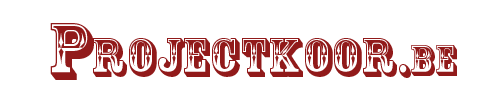
<style>
.page{position:relative;width:500px;height:104px;background:#ffffff}
.page>*{position:absolute;margin:0}
.t1{font:75px "RosewoodStd-Regular";color:#911a1a;font-variant:small-caps}
.t2{font:58.3px "RosewoodStd-Regular";color:#911a1a;font-variant:small-caps}
</style>
<div class="page">
<p class="t1" style="left:50px;top:23px;width:407px;height:57px">Projectkoor<span class="t2">.be</span></p>
</div>
